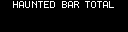
<style>
.page{position:relative;width:128px;height:32px;background:#000000}
.page>*{position:absolute;margin:0}
.t1{font:10px "Terminal";letter-spacing:-0.125em;color:#ffffff}
</style>
<div class="page">
<p class="t1" style="left:13px;top:1px;width:66px;height:7px">HAUNTED BAR</p>
</div>
